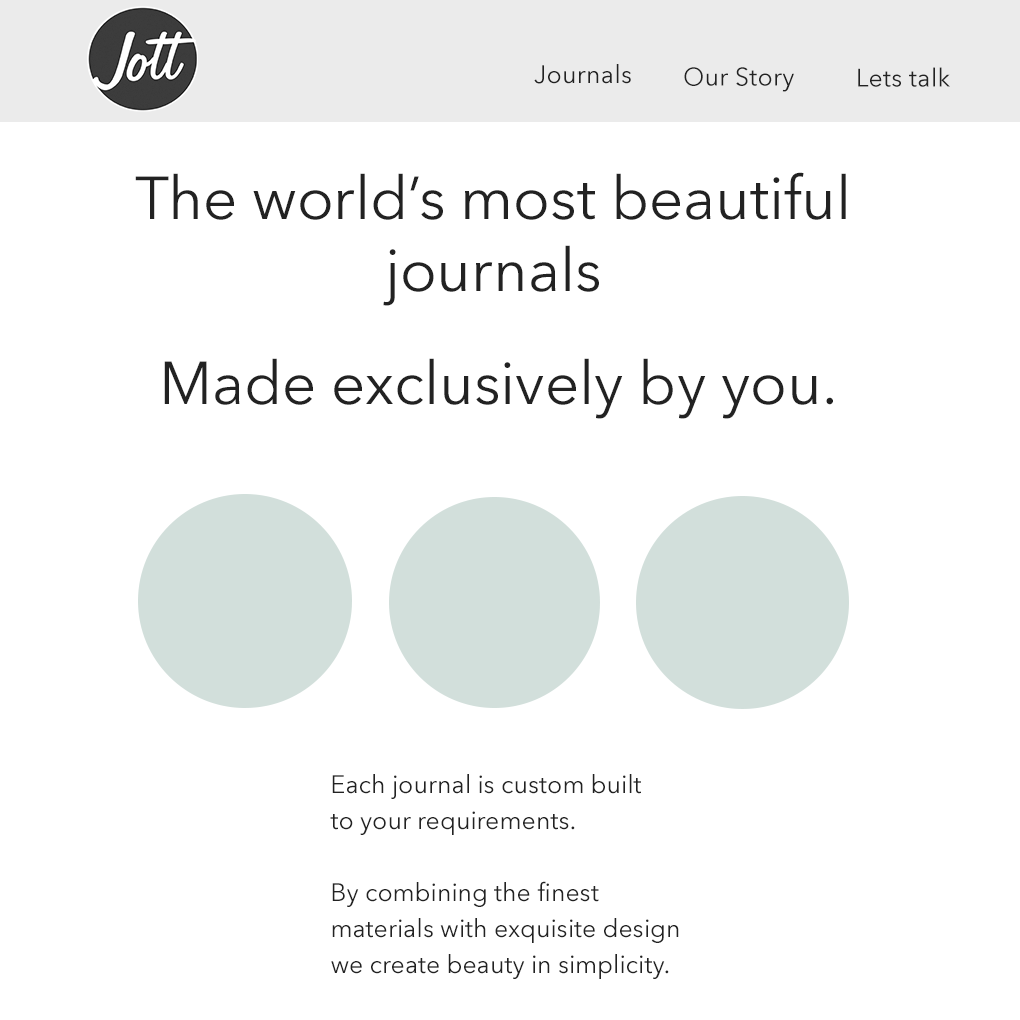
<style>
.page{position:relative;width:1020px;height:1020px;background:#ffffff}
.page>*{position:absolute;margin:0}
.t1{font:25px "AvenirNextLTW01-Regular";letter-spacing:0.01em;color:#222222}
.t2{font:60px "AvenirNextLTW01-Regular";color:#222222}
.t3{font:25px/36px "AvenirNextLTW01-Regular";color:#222222}
</style>
<div class="page">
<p class="t1" style="left:534px;top:64px;width:97px;height:20px">Journals</p>
<p class="t1" style="left:684px;top:67px;width:110px;height:25px">Our Story</p>
<p class="t1" style="left:858px;top:67px;width:92px;height:20px">Lets talk</p>
<p class="t2" style="left:135px;top:172px;width:711px;height:134px;text-align:center">The world’s most beautiful<br>journals</p>
<p class="t2" style="left:164px;top:358px;width:669px;height:61px">Made exclusively by you.</p>
<p class="t3" style="left:330px;top:774px;width:349px;height:205px">Each journal is custom built<br>to your requirements.<br><br>By combining the finest <br>materials with exquisite design<br>we create beauty in simplicity.</p>
</div>
